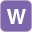
<style>
.page{position:relative;width:32px;height:32px;background:#7d65ac}
.page>*{position:absolute;margin:0}
.t1{font:21px "Helvetica-Bold";color:#ffffff}
</style>
<div class="page">
<p class="t1" style="left:6px;top:9px;width:20px;height:15px">W</p>
</div>
